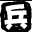
<style>
.page{position:relative;width:32px;height:32px;background:#000000}
.page>*{position:absolute;margin:0}
.t1{font:28px "DFPHaiBaoW12";letter-spacing:0.15em}
.t2{font:28px "DFPHaiBaoW12";letter-spacing:0.15em;color:#ffffff}
</style>
<div class="page">
<p class="t1" style="left:3px;top:3px;width:26px;height:26px">爆</p>
<p class="t1" style="left:3px;top:3px;width:26px;height:26px">炸</p>
<p class="t2" style="left:4px;top:3px;width:24px;height:26px">兵</p>
</div>
